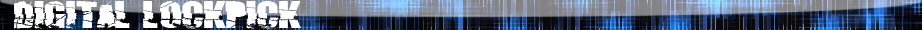
<style>
.page{position:relative;width:922px;height:30px}
.page>*{position:absolute;margin:0}
.t1{font:27px "Broken74";color:#ffffff}
</style>
<div class="page">
<p class="t1" style="left:14px;top:0px;width:392px;height:31px">Digital Lockpick</p>
</div>
